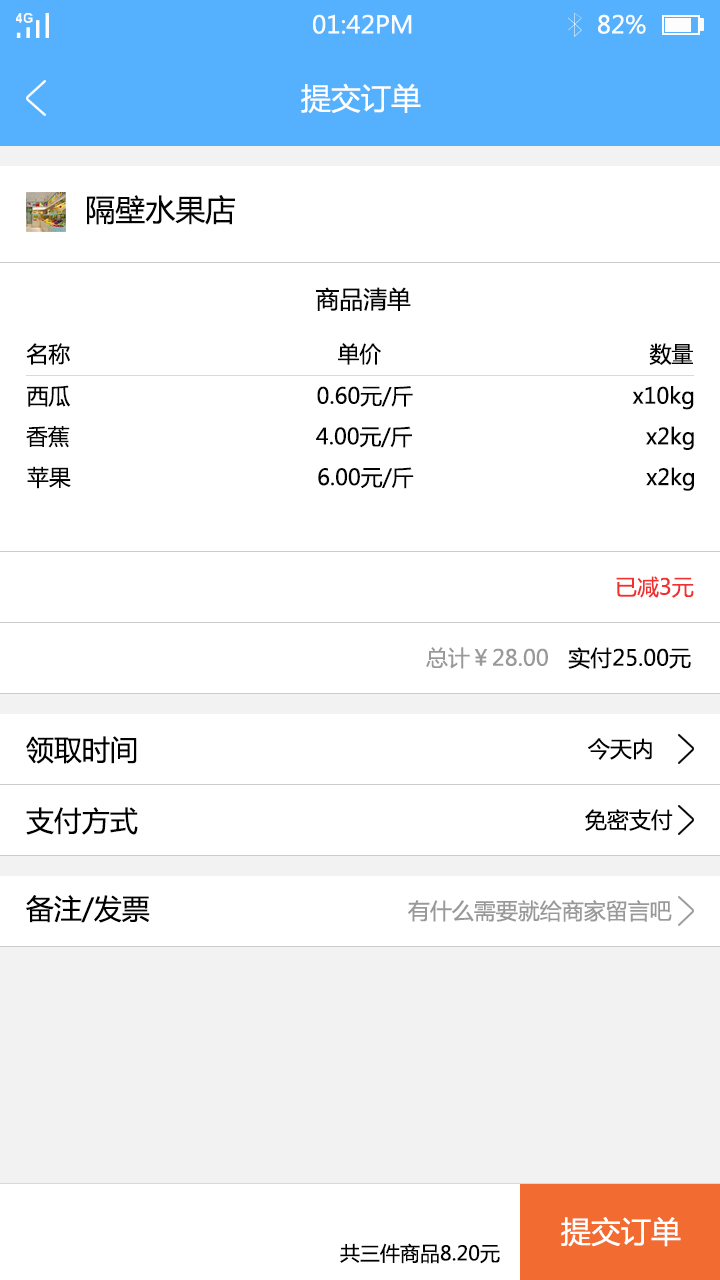
<style>
.page{position:relative;width:720px;height:1280px;background:#ffffff}
.page>*{position:absolute;margin:0}
.t1{font:24px "MicrosoftYaHei";color:#fbfdfc}
.t2{font:30px "MicrosoftYaHei";color:#ffffff}
.t3{font:30px "MicrosoftYaHei";color:#030303}
.t4{font:24px "MicrosoftYaHei";color:#030303}
.t5{font:22px "MicrosoftYaHei";color:#030303}
.t6{font:22px "MicrosoftYaHei";color:#f23030}
.t7{font:22px "MicrosoftYaHei";color:#999999}
.t8{font:28px "MicrosoftYaHei";color:#000000}
.t9{font:22px "MicrosoftYaHei";color:#000000}
.t10{font:20px "MicrosoftYaHei";color:#000000}
</style>
<div class="page">
<p class="t1" style="left:313px;top:14px;width:99px;height:20px">01:42PM</p>
<p class="t1" style="left:598px;top:14px;width:48px;height:20px">82%</p>
<p class="t2" style="left:301px;top:83px;width:120px;height:30px">提交订单</p>
<p class="t3" style="left:87px;top:195px;width:148px;height:30px">隔壁水果店</p>
<p class="t4" style="left:316px;top:287px;width:95px;height:24px">商品清单</p>
<p class="t5" style="left:26px;top:343px;width:44px;height:22px">名称</p>
<p class="t5" style="left:338px;top:343px;width:43px;height:22px">单价</p>
<p class="t5" style="left:649px;top:343px;width:44px;height:22px">数量</p>
<p class="t5" style="left:27px;top:385px;width:44px;height:22px">西瓜</p>
<p class="t5" style="left:317px;top:386px;width:96px;height:21px">0.60元/斤</p>
<p class="t5" style="left:632px;top:386px;width:62px;height:24px">x10kg</p>
<p class="t5" style="left:26px;top:426px;width:44px;height:22px">香蕉</p>
<p class="t5" style="left:316px;top:426px;width:96px;height:22px">4.00元/斤</p>
<p class="t5" style="left:646px;top:426px;width:48px;height:24px">x2kg</p>
<p class="t5" style="left:27px;top:466px;width:44px;height:23px">苹果</p>
<p class="t5" style="left:318px;top:467px;width:96px;height:22px">6.00元/斤</p>
<p class="t5" style="left:646px;top:467px;width:48px;height:24px">x2kg</p>
<p class="t6" style="left:616px;top:576px;width:78px;height:22px">已减3元</p>
<p class="t7" style="left:426px;top:647px;width:265px;height:22px">总计￥28.00<span class="t5">   实付25.00元</span></p>
<p class="t8" style="left:26px;top:736px;width:111px;height:28px">领取时间</p>
<p class="t9" style="left:588px;top:738px;width:64px;height:22px">今天内</p>
<p class="t8" style="left:26px;top:807px;width:112px;height:28px">支付方式</p>
<p class="t9" style="left:585px;top:809px;width:88px;height:22px">免密支付</p>
<p class="t8" style="left:26px;top:895px;width:124px;height:28px">备注/发票</p>
<p class="t7" style="left:408px;top:900px;width:264px;height:22px">有什么需要就给商家留言吧</p>
<p class="t2" style="left:561px;top:1217px;width:120px;height:30px">提交订单</p>
<p class="t10" style="left:340px;top:1243px;width:160px;height:21px">共三件商品8.20元</p>
</div>
